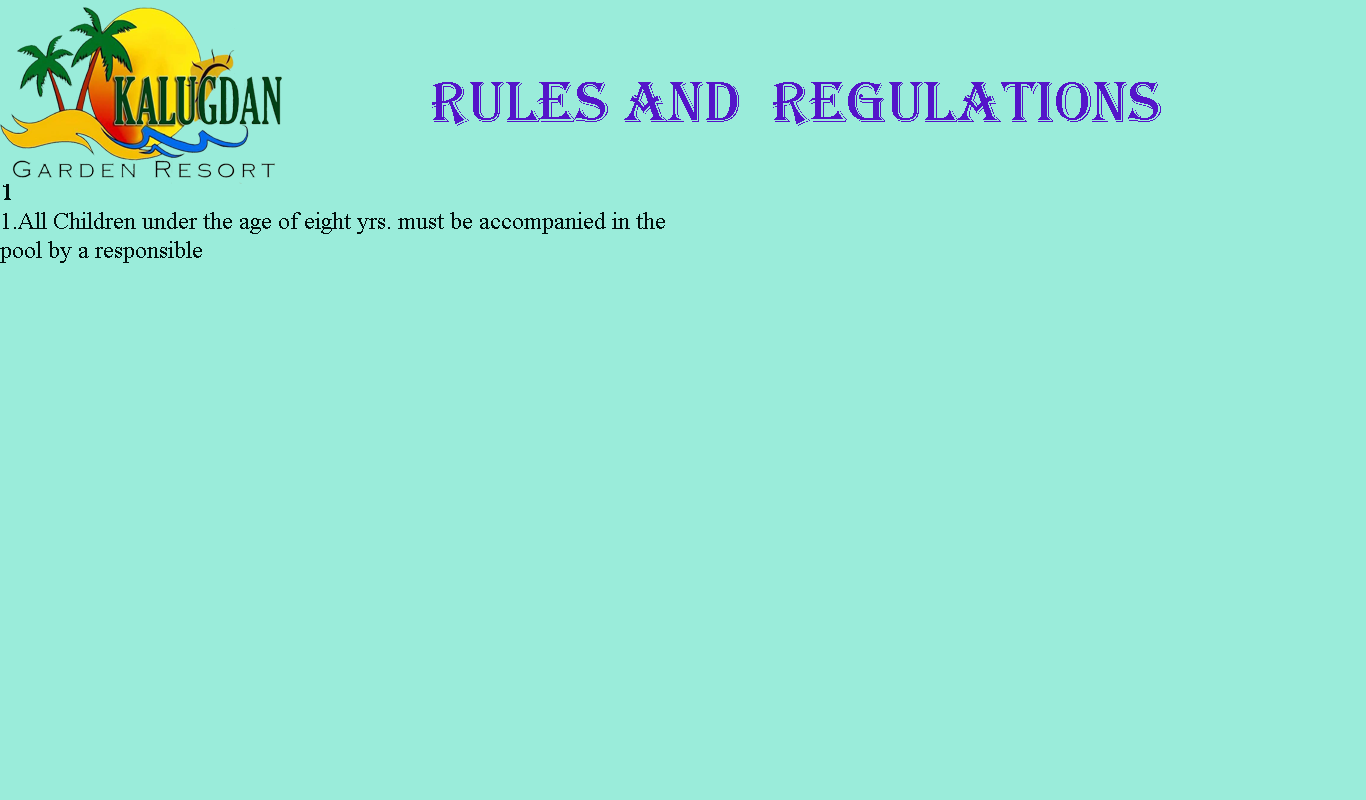
<style>
.page{position:relative;width:1366px;height:800px;background:#9aecda}
.page>*{position:absolute;margin:0}
.t1{font:60px "Algerian";color:#5414c9}
.t2{font:72px "BlackoakStd";color:#9aecda}
.t3{font:24px "TimesNewRomanPSMT";color:#010f0c}
.t4{font:24px "Algerian";color:#010f0c}
</style>
<div class="page">
<p class="t1" style="left:432px;top:82px;width:928px;height:44px">Rules and  Regulations<span class="t2">ns</span></p>
<p class="t3" style="left:0px;top:184px;width:665px;height:79px"><span class="t4">1<br></span>1.All Children under the age of eight yrs. must be accompanied in the <br>pool by a responsible</p>
</div>
